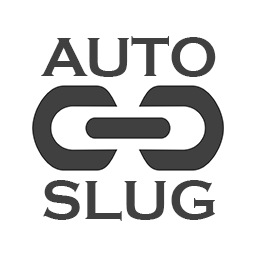
<style>
.page{position:relative;width:256px;height:256px;background:#ffffff}
.page>*{position:absolute;margin:0}
.t1{font:57px "CopperplateGothic-Bold";color:#404040}
</style>
<div class="page">
<p class="t1" style="left:41px;top:36px;width:175px;height:41px">AUTO</p>
<p class="t1" style="left:43px;top:180px;width:172px;height:41px">SLUG</p>
</div>
